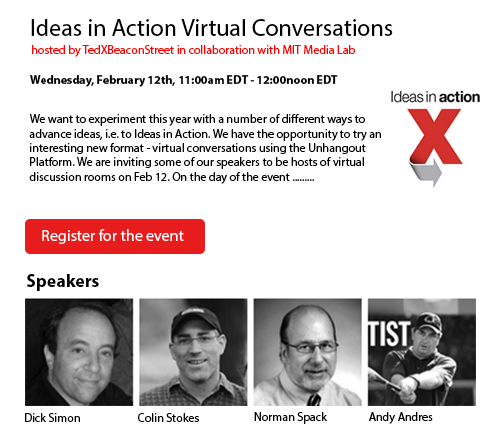
<style>
.page{position:relative;width:500px;height:433px;background:#ffffff}
.page>*{position:absolute;margin:0}
.t1{font:24px "MyriadPro-Regular";color:#000000}
.t2{font:12px "MyriadPro-Regular";color:#ff0000}
.t3{font:12px "MyriadPro-Bold";color:#000000}
.t4{font:12px "MyriadPro-Regular";color:#000000}
.t5{font:16px "MyriadPro-Regular";color:#ffffff}
.t6{font:18px "MyriadPro-Bold";color:#000000}
</style>
<div class="page">
<p class="t1" style="left:31px;top:19px;width:362px;height:17px">Ideas in Action Virtual Conversations</p>
<p class="t2" style="left:32px;top:45px;width:323px;height:12px">hosted by TedXBeaconStreet in collaboration with MIT Media Lab</p>
<p class="t3" style="left:30px;top:75px;width:308px;height:12px">Wednesday, February 12th, 11:00am EDT - 12:00noon EDT</p>
<p class="t4" style="left:29px;top:114px;width:352px;height:70px">We want to experiment this year with a number of different ways to advance ideas, i.e. to Ideas in Action. We have the opportunity to try an interesting new format - virtual conversations using the Unhangout Platform. We are inviting some of our speakers to be hosts of virtual discussion rooms on Feb 12. On the day of the event .........</p>
<p class="t5" style="left:42px;top:229px;width:142px;height:15px">Register for the event</p>
<p class="t6" style="left:27px;top:274px;width:72px;height:17px">Speakers</p>
<p class="t4" style="left:25px;top:413px;width:55px;height:9px">Dick Simon</p>
<p class="t4" style="left:138px;top:413px;width:61px;height:9px">Colin Stokes</p>
<p class="t4" style="left:254px;top:412px;width:73px;height:12px">Norman Spack</p>
<p class="t4" style="left:369px;top:412px;width:64px;height:12px">Andy Andres</p>
</div>
